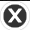
<style>
.page{position:relative;width:30px;height:30px;background:#ffffff}
.page>*{position:absolute;margin:0}
.t1{font:24px "MSReferenceSansSerif";color:#ffffff;font-weight:bold}
</style>
<div class="page">
<p class="t1" style="left:8px;top:7px;width:14px;height:15px">x</p>
</div>
